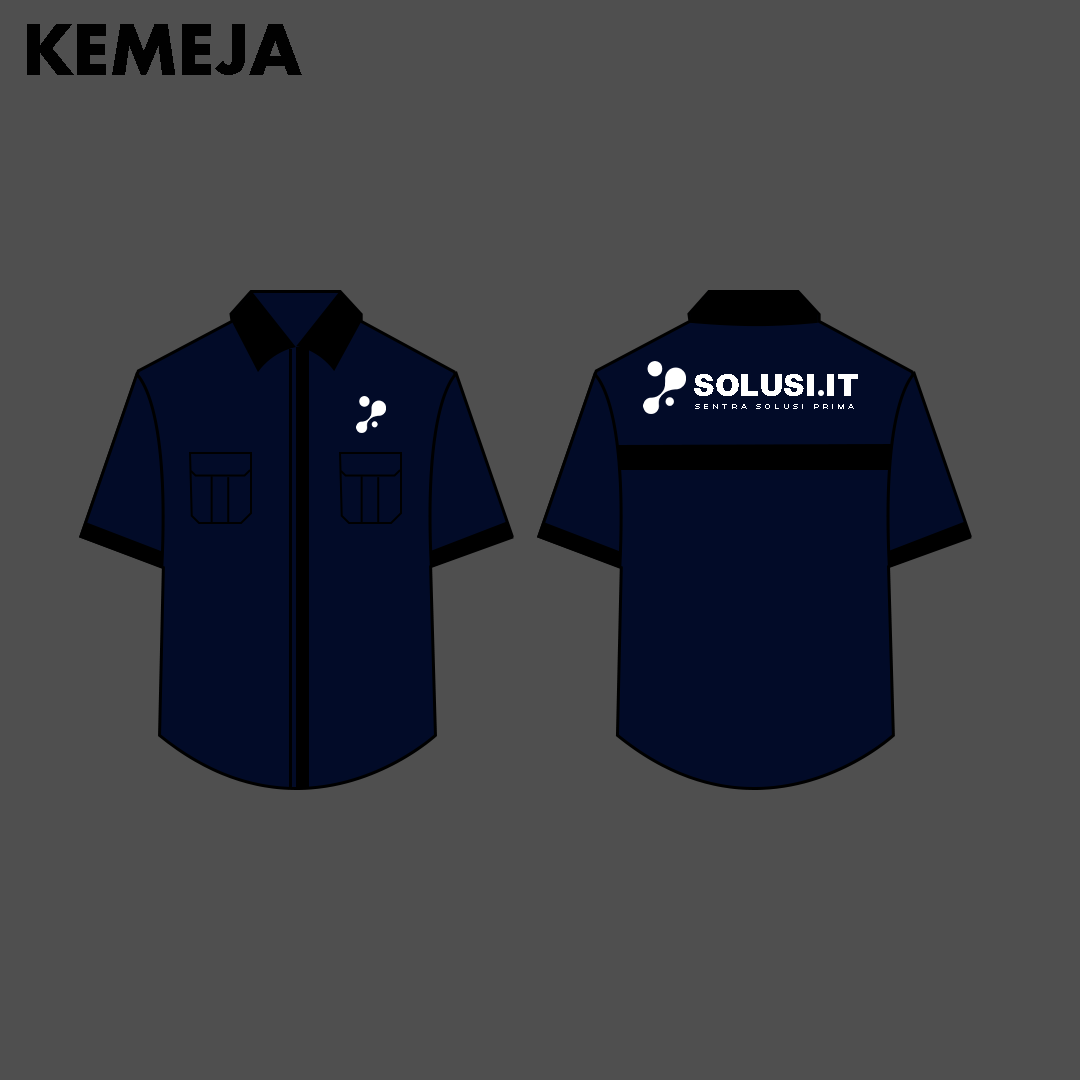
<style>
.page{position:relative;width:1080px;height:1080px;background:#4f4f4f}
.page>*{position:absolute;margin:0}
.t1{font:67.3px "Futura-Bold";color:#010101}
.t2{font:30.2px "Howvetica";color:#ffffff}
.t3{font:7px "IntegralCF-Medium";letter-spacing:0.58em;color:#ffffff}
</style>
<div class="page">
<p class="t1" style="left:27px;top:24px;width:275px;height:51px">KEMEJA</p>
<p class="t2" style="left:694px;top:374px;width:164px;height:22px">SOLUSI.IT</p>
<p class="t3" style="left:695px;top:404px;width:159px;height:5px">SENTRA SOLUSI PRIMA</p>
</div>
